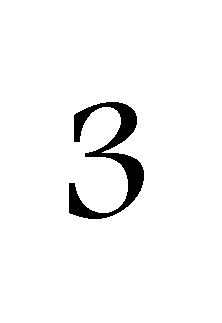
<style>
.page{position:relative;width:222px;height:323px;background:#ffffff}
.page>*{position:absolute;margin:0}
.t1{font:180px "FootlightMTLight";color:#000000}
</style>
<div class="page">
<p class="t1" style="left:69px;top:102px;width:75px;height:117px">3</p>
</div>
